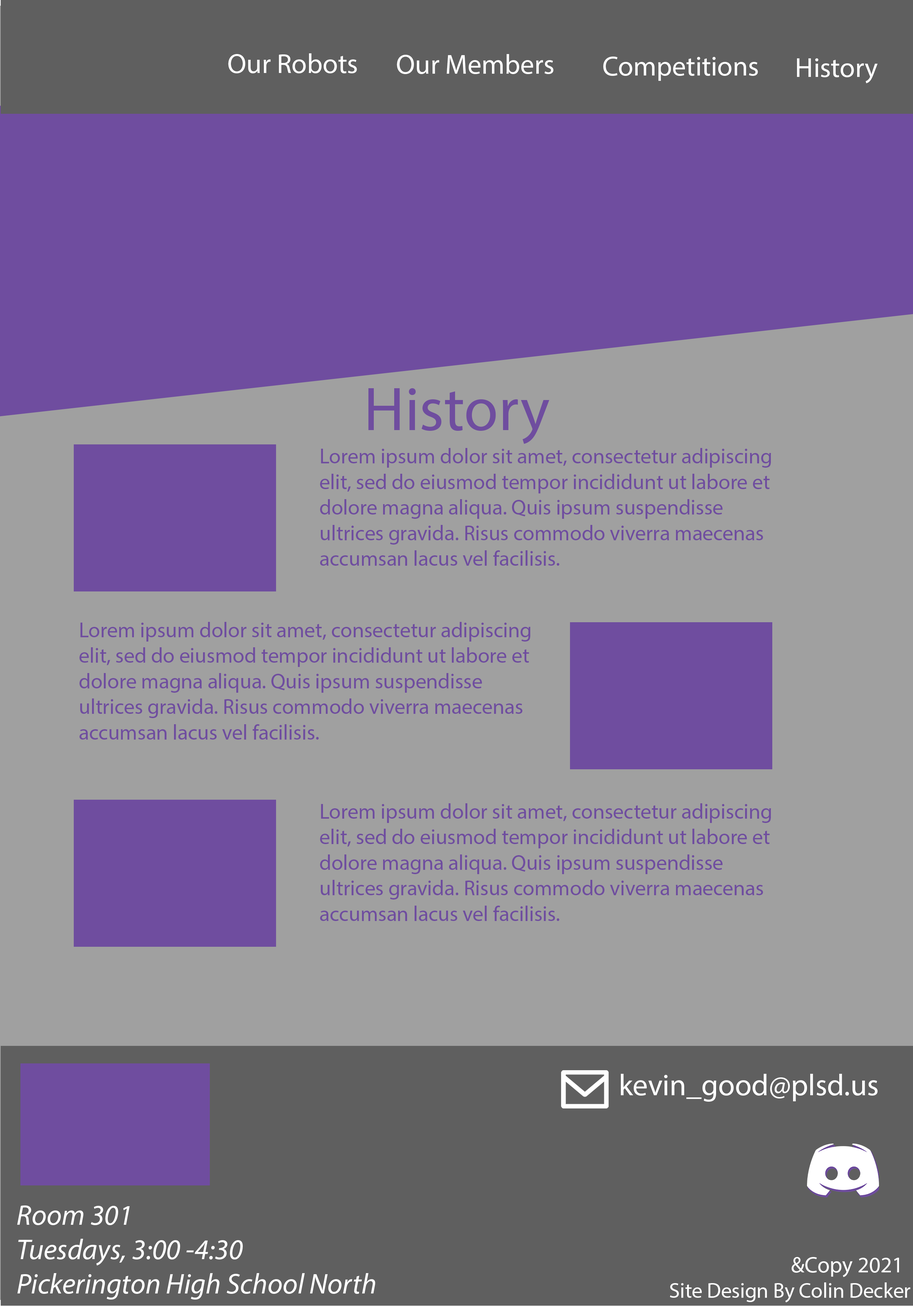
<style>
.page{position:relative;width:913px;height:1306px;background:#a0a0a0}
.page>*{position:absolute;margin:0}
.t1{font:27.7px "MyriadPro-Regular";color:#ffffff}
.t2{font:62.1px "MyriadPro-Regular";color:#6f4d9f}
.t3{font:21.3px "MyriadPro-Regular";color:#6f4d9f}
.t4{font:30.2px "MyriadPro-Regular";color:#ffffff}
.t5{font:28.7px "MyriadPro-It";color:#fefefe}
.t6{font:22.4px "MyriadPro-Regular";color:#fefefe}
.t7{font:21.2px "MyriadPro-Regular";color:#fefefe}
</style>
<div class="page">
<p class="t1" style="left:228px;top:53px;width:129px;height:20px">Our Robots</p>
<p class="t1" style="left:397px;top:54px;width:156px;height:20px">Our Members</p>
<p class="t1" style="left:603px;top:57px;width:155px;height:24px">Competitions</p>
<p class="t1" style="left:797px;top:58px;width:80px;height:25px">History</p>
<p class="t2" style="left:368px;top:388px;width:181px;height:56px">History</p>
<p class="t3" style="left:320px;top:448px;width:451px;height:118px">Lorem ipsum dolor sit amet, consectetur adipiscing elit, sed do eiusmod tempor incididunt ut labore et dolore magna aliqua. Quis ipsum suspendisse ultrices gravida. Risus commodo viverra maecenas accumsan lacus vel facilisis.</p>
<p class="t3" style="left:79px;top:622px;width:451px;height:118px">Lorem ipsum dolor sit amet, consectetur adipiscing elit, sed do eiusmod tempor incididunt ut labore et dolore magna aliqua. Quis ipsum suspendisse ultrices gravida. Risus commodo viverra maecenas accumsan lacus vel facilisis.</p>
<p class="t3" style="left:320px;top:804px;width:451px;height:117px">Lorem ipsum dolor sit amet, consectetur adipiscing elit, sed do eiusmod tempor incididunt ut labore et dolore magna aliqua. Quis ipsum suspendisse ultrices gravida. Risus commodo viverra maecenas accumsan lacus vel facilisis.</p>
<p class="t4" style="left:621px;top:1074px;width:256px;height:28px">kevin_good@plsd.us</p>
<p class="t5" style="left:17px;top:1206px;width:358px;height:94px">Room 301<br>Tuesdays, 3:00 -4:30<br>Pickerington High School North</p>
<p class="t6" style="left:791px;top:1257px;width:108px;height:20px">&amp;Copy 2021</p>
<p class="t7" style="left:670px;top:1283px;width:240px;height:20px">Site Design By Colin Decker</p>
</div>
